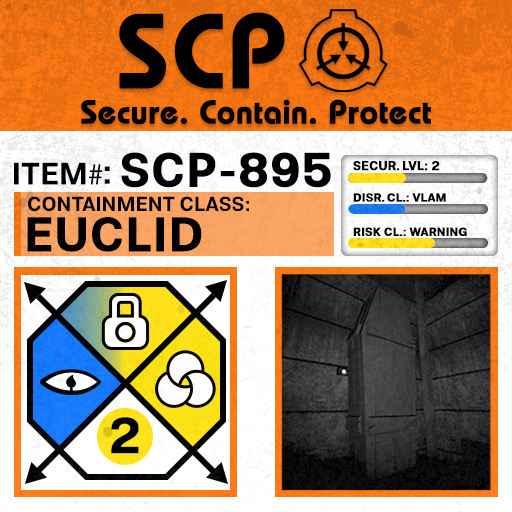
<style>
.page{position:relative;width:512px;height:512px}
.page>*{position:absolute;margin:0}
.t1{font:105.8px "BauhausLT-Demi";color:#000000;font-weight:bold}
.t2{font:33px "BauhausLT-Demi";color:#000000;font-weight:bold}
.t3{font:47.6px "Molde-Semibold";color:#000000;font-weight:bold}
.t4{font:12.5px "Molde-Semibold";color:#000000;font-weight:bold}
.t5{font:31.1px "Molde-Semibold";color:#000000}
.t6{font:31.1px "MyriadPro-Regular";color:#000000}
.t7{font:34.5px "Molde-Semibold";color:#000000}
.t8{font:20.3px "Molde-Semibold";color:#000000}
.t9{font:11.7px "Molde-Semibold";color:#000000;font-weight:bold}
.t10{font:47.8px "Molde-Semibold";color:#000000;font-weight:bold}
</style>
<div class="page">
<p class="t1" style="left:119px;top:12px;width:166px;height:77px">SCP</p>
<p class="t2" style="left:81px;top:99px;width:350px;height:26px">Secure. Contain. Protect</p>
<p class="t3" style="left:121px;top:152px;width:210px;height:36px">SCP-895</p>
<p class="t4" style="left:353px;top:161px;width:87px;height:10px">SECUR. LVL: 2</p>
<p class="t5" style="left:14px;top:162px;width:89px;height:23px">ITEM<span class="t6">#</span></p>
<p class="t7" style="left:104px;top:166px;width:6px;height:18px">:</p>
<p class="t8" style="left:28px;top:196px;width:221px;height:16px">CONTAINMENT CLASS:</p>
<p class="t9" style="left:353px;top:193px;width:93px;height:9px">DISR. CL.: VLAM</p>
<p class="t10" style="left:27px;top:217px;width:175px;height:35px">EUCLID</p>
<p class="t9" style="left:353px;top:227px;width:114px;height:9px">RISK CL.: WARNING</p>
</div>
